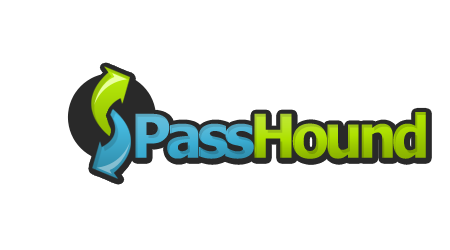
<style>
.page{position:relative;width:450px;height:250px;background:#ffffff}
.page>*{position:absolute;margin:0}
.t1{font:60px "Tahoma-Bold";letter-spacing:-0.075em}
</style>
<div class="page">
<p class="t1" style="left:135px;top:112px;width:291px;height:47px">PassHound</p>
</div>
